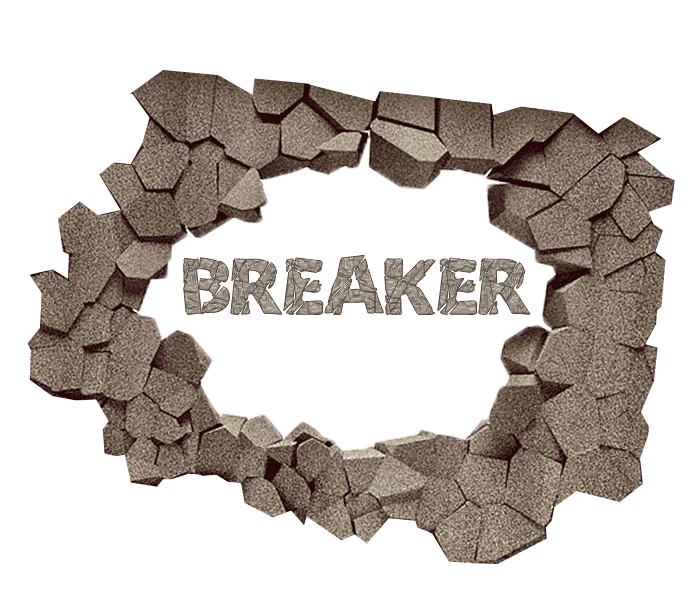
<style>
.page{position:relative;width:699px;height:600px;background:#ffffff}
.page>*{position:absolute;margin:0}
.t1{font:65.3px "Cracked";letter-spacing:0.025em;color:#a19587;scale:0.74 1}
</style>
<div class="page">
<p class="t1" style="left:183px;top:255px;width:347px;height:60px">BREAKER</p>
</div>
